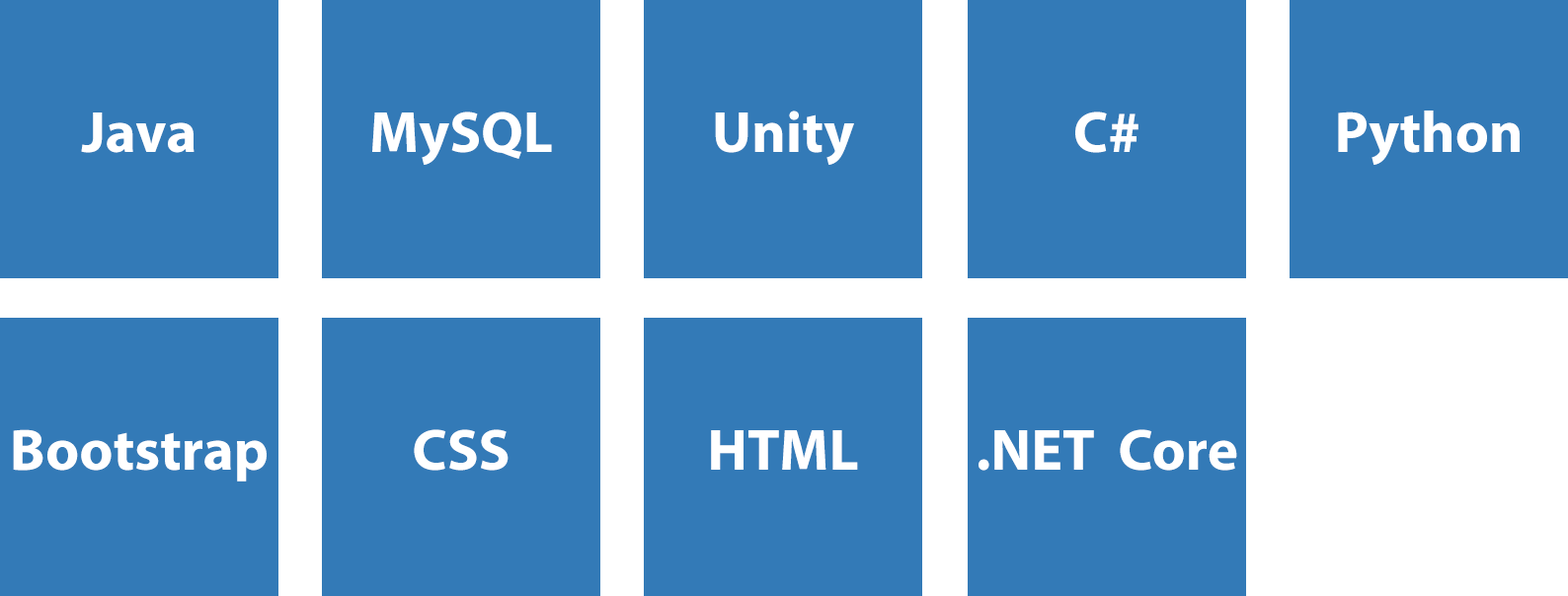
<style>
.page{position:relative;width:1568px;height:596px;background:#337ab7}
.page>*{position:absolute;margin:0}
.t1{font:58.5px "MyriadPro-Bold";color:#ffffff}
</style>
<div class="page">
<p class="t1" style="left:81px;top:113px;width:114px;height:40px">Java</p>
<p class="t1" style="left:372px;top:112px;width:180px;height:53px">MySQL</p>
<p class="t1" style="left:715px;top:111px;width:139px;height:54px">Unity</p>
<p class="t1" style="left:1075px;top:112px;width:63px;height:41px">C#</p>
<p class="t1" style="left:1338px;top:111px;width:182px;height:54px">Python</p>
<p class="t1" style="left:13px;top:430px;width:254px;height:52px">Bootstrap</p>
<p class="t1" style="left:414px;top:430px;width:95px;height:41px">CSS</p>
<p class="t1" style="left:711px;top:431px;width:147px;height:39px">HTML</p>
<p class="t1" style="left:979px;top:430px;width:258px;height:41px">.NET  Core</p>
</div>
